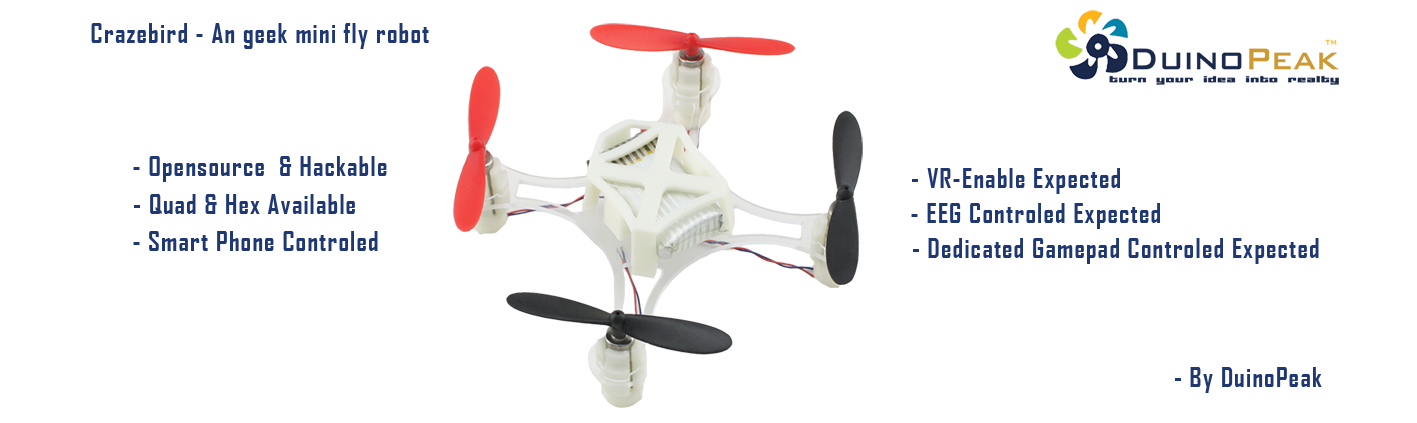
<style>
.page{position:relative;width:1417px;height:423px;background:#ffffff}
.page>*{position:absolute;margin:0}
.t1{font:25.7px "AgencyFB-Bold";letter-spacing:0.05em;color:#1f3773}
</style>
<div class="page">
<p class="t1" style="left:91px;top:23px;width:338px;height:26px">Crazebird - An geek mini fly robot</p>
<p class="t1" style="left:133px;top:156px;width:254px;height:26px">- Opensource  &amp; Hackable</p>
<p class="t1" style="left:912px;top:168px;width:208px;height:26px">- VR-Enable Expected</p>
<p class="t1" style="left:134px;top:194px;width:221px;height:20px">- Quad &amp; Hex Available</p>
<p class="t1" style="left:911px;top:203px;width:249px;height:26px">- EEG Controled Expected</p>
<p class="t1" style="left:133px;top:231px;width:245px;height:20px">- Smart Phone Controled</p>
<p class="t1" style="left:913px;top:238px;width:406px;height:26px">- Dedicated Gamepad Controled Expected</p>
<p class="t1" style="left:1175px;top:367px;width:147px;height:26px">- By DuinoPeak</p>
</div>
